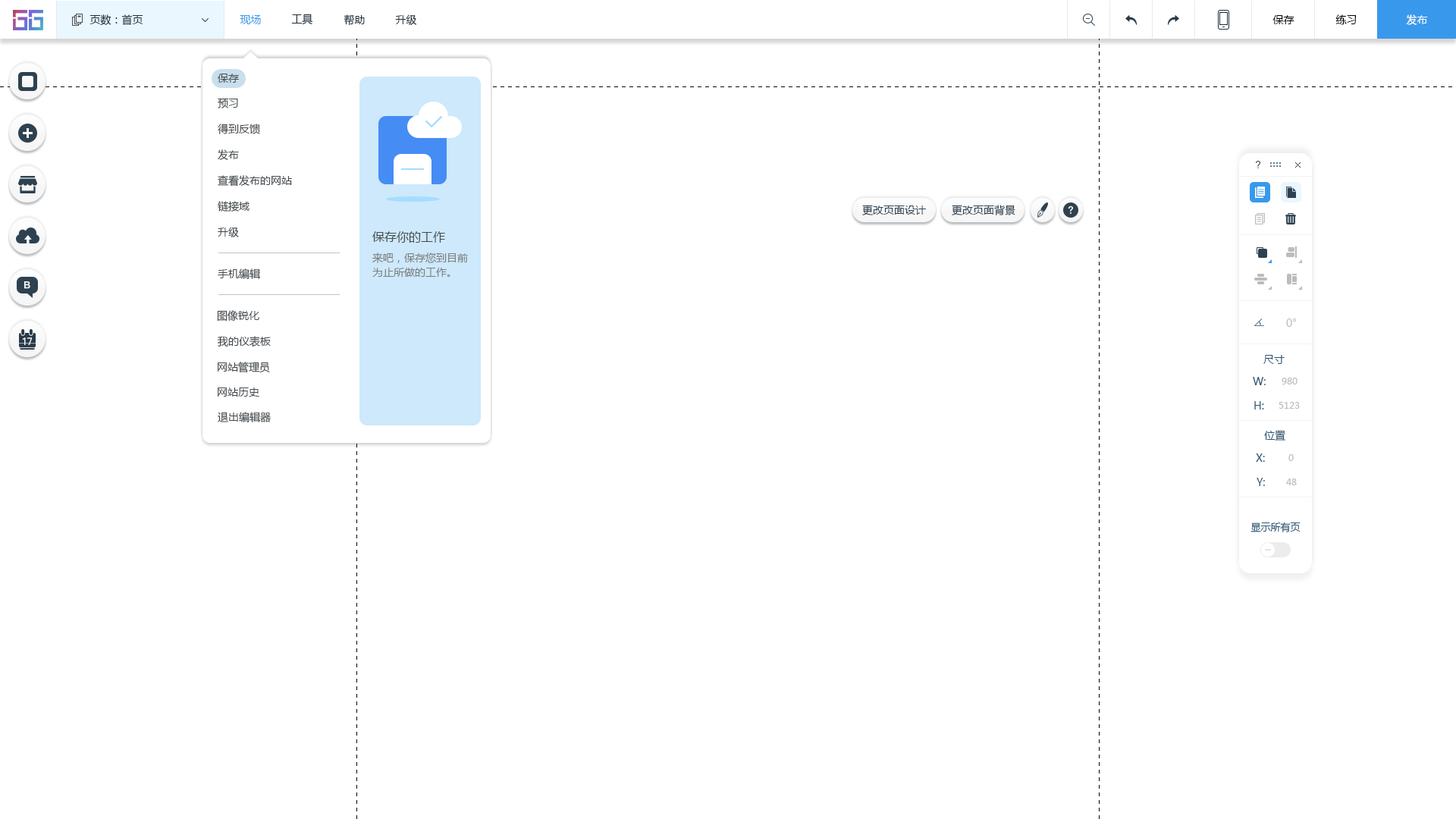
<style>
.page{position:relative;width:1456px;height:819px;background:#ffffff}
.page>*{position:absolute;margin:0}
.t1{font:10.6px "MicrosoftYaHei";color:#20303c}
.t2{font:10.6px "MicrosoftYaHei";color:#3899ec}
.t3{font:10.6px "MicrosoftYaHei";color:#000000}
.t4{font:10.6px "MicrosoftYaHei";color:#ffffff}
.t5{font:10.6px "MicrosoftYaHei";color:#454b4f}
.t6{font:10.6px "MicrosoftYaHei";color:#2d4150}
.t7{font:12.1px "MicrosoftYaHei";color:#454b4f}
.t8{font:10.6px/14.4px "MicrosoftYaHei";color:#7e7e7e}
.t9{font:10.6px "MicrosoftYaHei";color:#bcbcbc}
.t10{font:10.6px "MicrosoftYaHei";color:#2b5672}
.t11{font:9.1px "MicrosoftYaHei";color:#bcbcbc}
.t12{font:9.9px "MicrosoftYaHei";color:#2b5672}
</style>
<div class="page">
<p class="t1" style="left:89px;top:14px;width:54px;height:12px">页数：首页</p>
<p class="t2" style="left:240px;top:15px;width:21px;height:9px">现场</p>
<p class="t1" style="left:291px;top:14px;width:22px;height:11px">工具</p>
<p class="t1" style="left:344px;top:14px;width:21px;height:12px">帮助</p>
<p class="t1" style="left:395px;top:14px;width:22px;height:11px">升级</p>
<p class="t3" style="left:1272px;top:15px;width:22px;height:9px">保存</p>
<p class="t3" style="left:1335px;top:14px;width:22px;height:11px">练习</p>
<p class="t4" style="left:1406px;top:14px;width:22px;height:11px">发布</p>
<p class="t5" style="left:218px;top:74px;width:21px;height:9px">保存</p>
<p class="t5" style="left:218px;top:98px;width:20px;height:10px">预习</p>
<p class="t5" style="left:218px;top:124px;width:42px;height:10px">得到反馈</p>
<p class="t5" style="left:218px;top:149px;width:21px;height:11px">发布</p>
<p class="t5" style="left:218px;top:175px;width:74px;height:12px">查看发布的网站</p>
<p class="t5" style="left:218px;top:201px;width:31px;height:11px">链接域</p>
<p class="t6" style="left:862px;top:205px;width:64px;height:10px">更改页面设计</p>
<p class="t6" style="left:952px;top:205px;width:63px;height:10px">更改页面背景</p>
<p class="t5" style="left:218px;top:227px;width:21px;height:10px">升级</p>
<p class="t7" style="left:372px;top:231px;width:73px;height:12px">保存你的工作</p>
<p class="t8" style="left:372px;top:253px;width:96px;height:24px">来吧，保存您到目前<br>为止所做的工作。</p>
<p class="t5" style="left:218px;top:268px;width:43px;height:11px">手机编辑</p>
<p class="t5" style="left:217px;top:310px;width:42px;height:12px">图像锐化</p>
<p class="t9" style="left:1286px;top:318px;width:11px;height:9px">0°</p>
<p class="t5" style="left:217px;top:336px;width:54px;height:11px">我的仪表板</p>
<p class="t5" style="left:218px;top:362px;width:52px;height:11px">网站管理员</p>
<p class="t10" style="left:1263px;top:355px;width:22px;height:9px">尺寸</p>
<p class="t10" style="left:1253px;top:377px;width:13px;height:8px">W:</p>
<p class="t11" style="left:1282px;top:378px;width:15px;height:6px">980</p>
<p class="t5" style="left:218px;top:388px;width:41px;height:9px">网站历史</p>
<p class="t10" style="left:1254px;top:401px;width:10px;height:8px">H:</p>
<p class="t11" style="left:1279px;top:402px;width:21px;height:7px">5123</p>
<p class="t5" style="left:218px;top:412px;width:53px;height:10px">退出编辑器</p>
<p class="t10" style="left:1264px;top:430px;width:22px;height:11px">位置</p>
<p class="t10" style="left:1256px;top:453px;width:9px;height:9px">X:</p>
<p class="t11" style="left:1288px;top:454px;width:6px;height:7px">0</p>
<p class="t10" style="left:1257px;top:478px;width:8px;height:8px">Y:</p>
<p class="t11" style="left:1286px;top:479px;width:11px;height:6px">48</p>
<p class="t12" style="left:1250px;top:522px;width:51px;height:10px">显示所有页</p>
</div>
